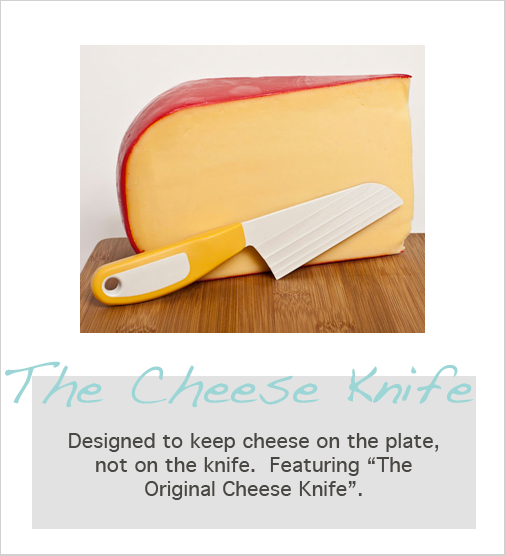
<style>
.page{position:relative;width:506px;height:556px;background:#ffffff}
.page>*{position:absolute;margin:0}
.t1{font:56px "Handwriting-Dakota";color:#9bd5d5}
.t2{font:20px "Geneva";color:#484743}
</style>
<div class="page">
<p class="t1" style="left:5px;top:361px;width:469px;height:47px">The Cheese Knife</p>
<p class="t2" style="left:69px;top:433px;width:370px;height:67px;text-align:center">Designed to keep cheese on the plate, not on the knife.  Featuring “The <br>Original Cheese Knife”.</p>
</div>
